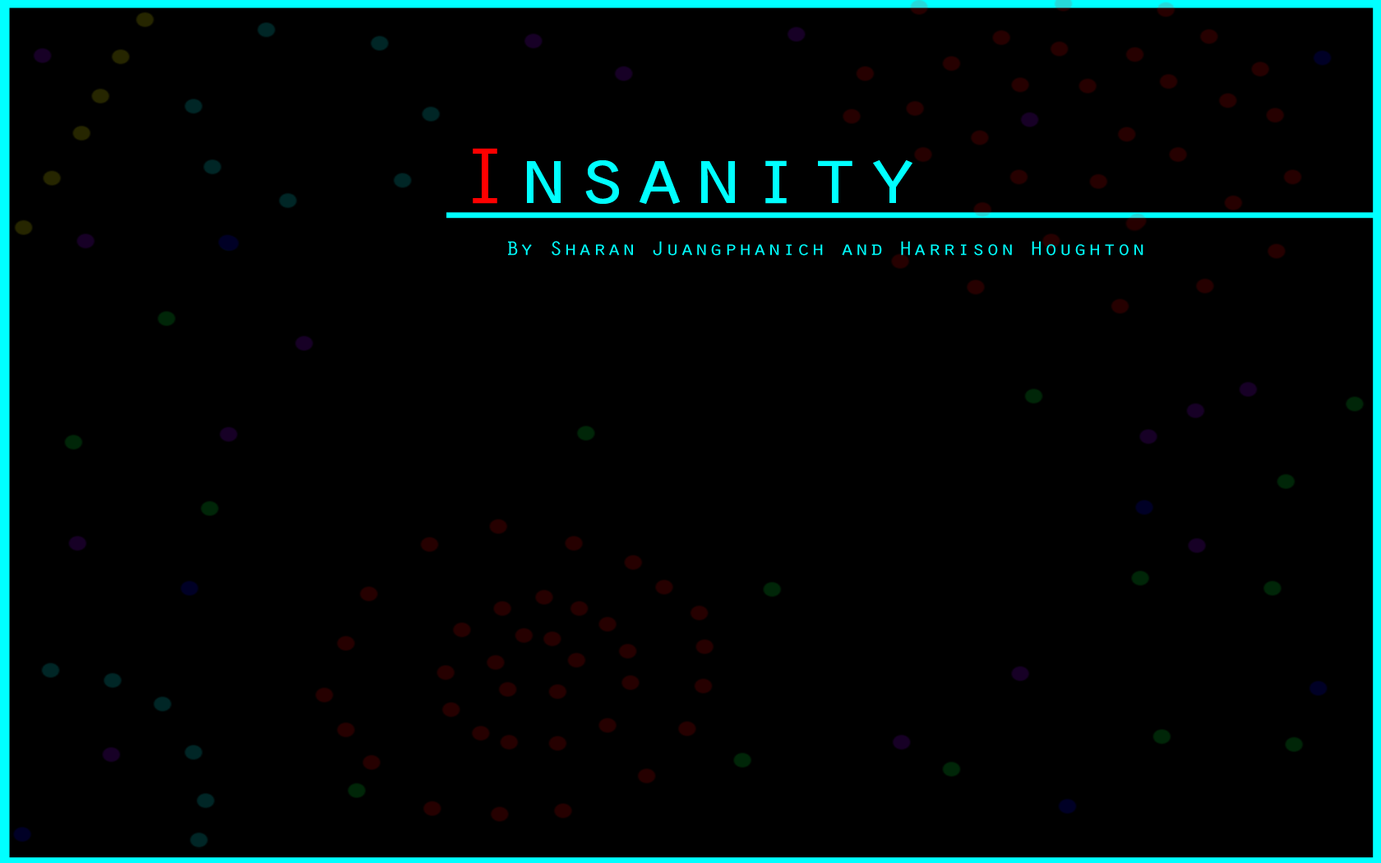
<style>
.page{position:relative;width:1381px;height:863px;background:#000000}
.page>*{position:absolute;margin:0}
.t1{font:80.9px "OratorStd";color:#00ffff;scale:1.2 1}
.t2{font:80.9px "OratorStd";color:#ff0000;scale:1.2 1}
.t3{font:20.2px "OratorStd";color:#00ffff;scale:1.2 1}
</style>
<div class="page">
<p class="t1" style="left:473px;top:148px;width:440px;height:57px"><span class="t2">I</span>nsanity</p>
<p class="t3" style="left:508px;top:241px;width:636px;height:15px">By Sharan Juangphanich and Harrison Houghton</p>
</div>
